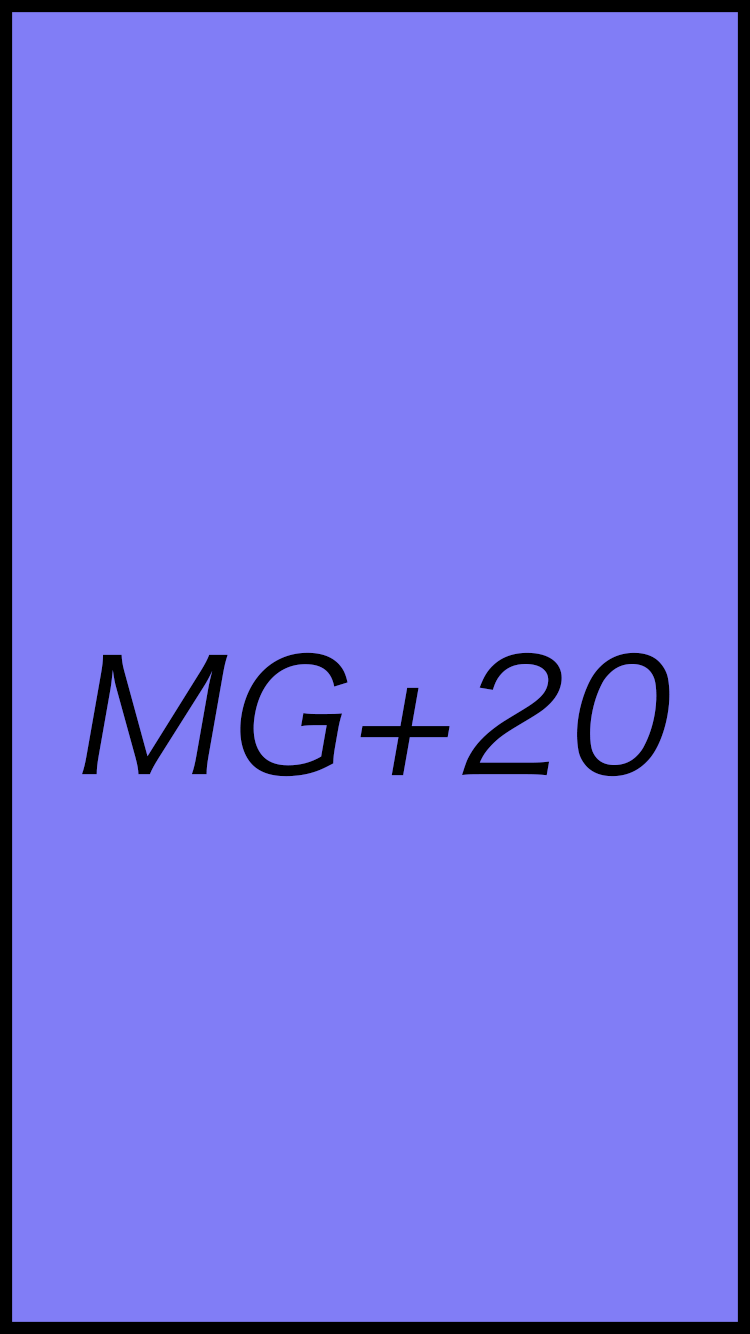
<style>
.page{position:relative;width:750px;height:1334px;background:#817df6}
.page>*{position:absolute;margin:0}
.t1{font:156.9px "HiraKakuPro-W3";color:#000000;font-weight:bold;font-style:italic}
</style>
<div class="page">
<p class="t1" style="left:82px;top:652px;width:588px;height:125px">MG+20</p>
</div>
